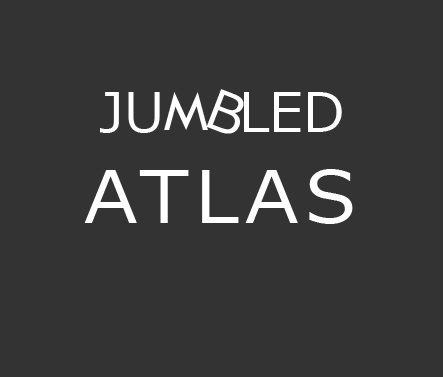
<style>
.page{position:relative;width:443px;height:377px;background:#333333}
.page>*{position:absolute;margin:0}
.t1{font:55px "Meiryo";color:#ffffff}
.t2{font:60px "TwCenMT-Regular";color:#ffffff}
.t3{font:72px "Meiryo";letter-spacing:0.075em;color:#ffffff;scale:1.1 1}
</style>
<div class="page">
<p class="t1" style="left:206px;top:89px;width:38px;height:45px;rotate:21deg">B</p>
<p class="t1" style="left:100px;top:92px;width:242px;height:41px">JU    LED</p>
<p class="t2" style="left:164px;top:92px;width:44px;height:38px">M</p>
<p class="t3" style="left:84px;top:169px;width:269px;height:55px">ATLAS</p>
</div>
